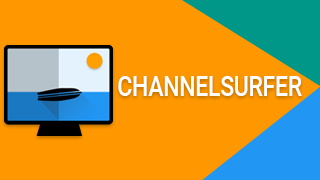
<style>
.page{position:relative;width:320px;height:180px;background:#ff9800}
.page>*{position:absolute;margin:0}
.t1{font:28.2px "Roboto-Medium";color:#ffffff;scale:0.8 1}
</style>
<div class="page">
<p class="t1" style="left:118px;top:76px;width:184px;height:20px">CHANNELSURFER</p>
</div>
